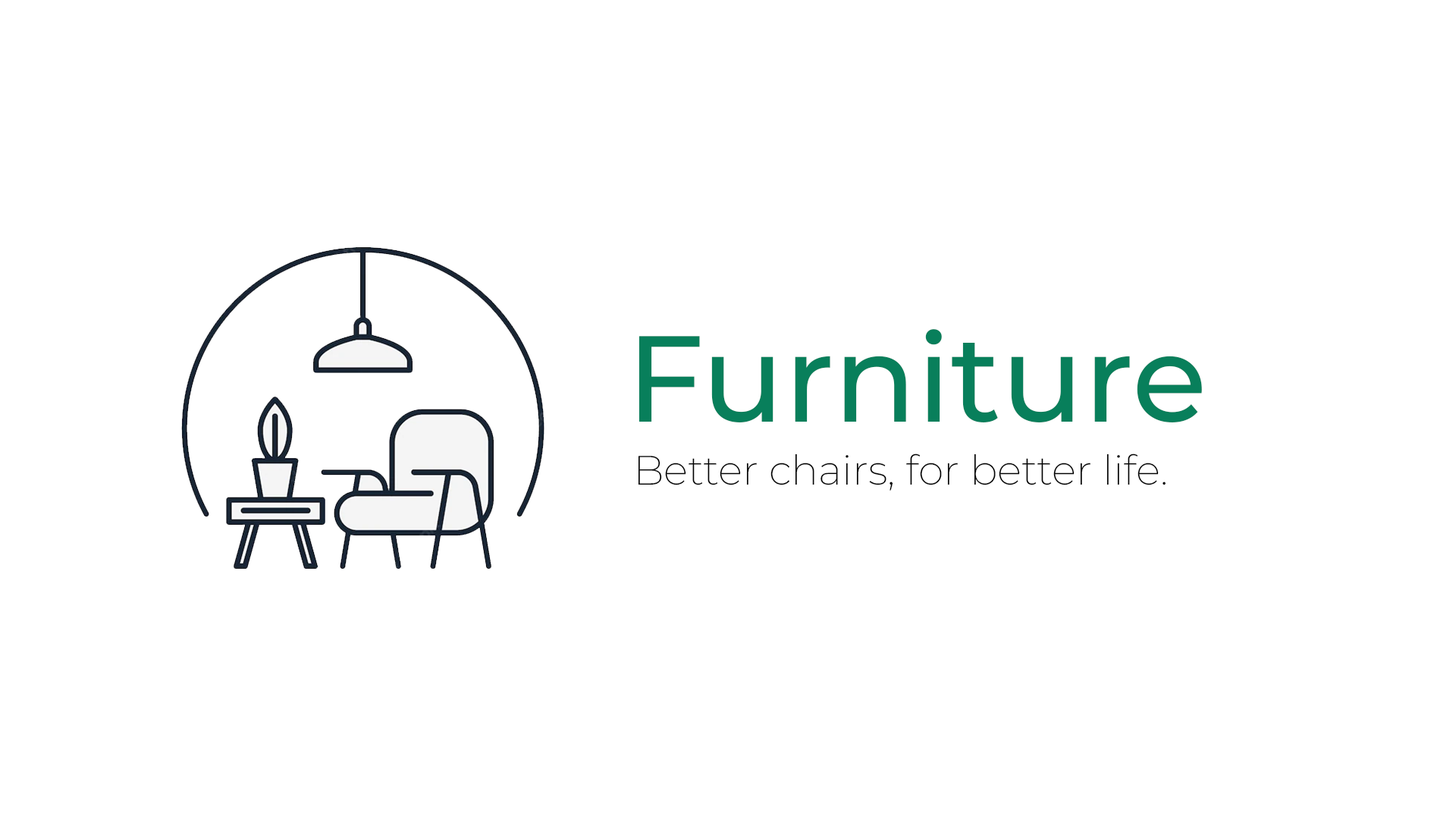
<style>
.page{position:relative;width:1456px;height:819px;background:#ffffff}
.page>*{position:absolute;margin:0}
.t1{font:122.1px "Montserrat-Medium";color:#087f5b}
.t2{font:40.9px "Montserrat-ExtraLight";color:#000000}
</style>
<div class="page">
<p class="t1" style="left:639px;top:329px;width:563px;height:93px">Furniture</p>
<p class="t2" style="left:638px;top:453px;width:528px;height:38px">Better chairs, for better life.</p>
</div>
